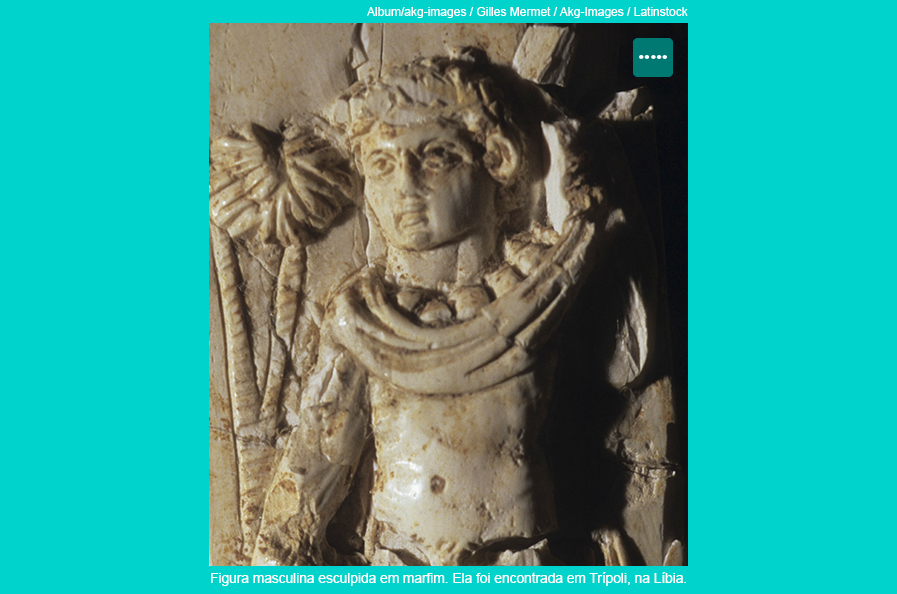
<style>
.page{position:relative;width:897px;height:594px;background:#00d3cc}
.page>*{position:absolute;margin:0}
.t1{font:12px "ArialMT";color:#ffffff}
.t2{font:13.5px "ArialMT";color:#ffffff}
</style>
<div class="page">
<p class="t1" style="left:367px;top:7px;width:321px;height:11px">Album/akg-images / Gilles Mermet / Akg-Images / Latinstock</p>
<p class="t2" style="left:211px;top:572px;width:475px;height:14px">Figura masculina esculpida em marfim. Ela foi encontrada em Trípoli, na Líbia.</p>
</div>
